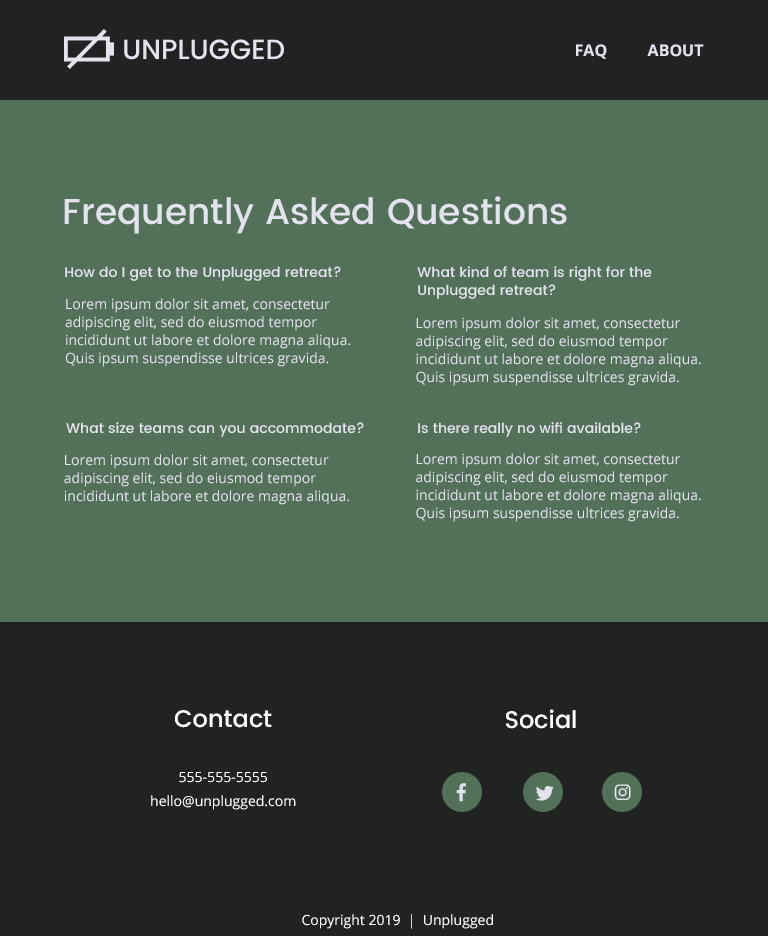
<style>
.page{position:relative;width:768px;height:936px;background:#527158}
.page>*{position:absolute;margin:0}
.t1{font:16px "OpenSans-Bold";color:#e2e3ed}
.t2{font:36px "Poppins-Medium";color:#e2e3ed}
.t3{font:14px "Poppins-Medium";color:#e2e3ed}
.t4{font:14px/18px "Poppins-Medium";color:#e2e3ed}
.t5{font:14px/18px "OpenSans";color:#e2e3ed}
.t6{font:24px "Poppins-Medium";color:#ffffff}
.t7{font:14px/24px "OpenSans";color:#ffffff}
.t8{font:14px "OpenSans";color:#ffffff}
</style>
<div class="page">
<p class="t1" style="left:576px;top:44px;width:31px;height:15px">FAQ</p>
<p class="t1" style="left:647px;top:44px;width:57px;height:13px">ABOUT</p>
<p class="t2" style="left:64px;top:196px;width:503px;height:38px">Frequently Asked Questions</p>
<p class="t3" style="left:65px;top:266px;width:276px;height:15px">How do I get to the Unplugged retreat?</p>
<p class="t4" style="left:417px;top:266px;width:235px;height:33px">What kind of team is right for the Unplugged retreat?</p>
<p class="t5" style="left:65px;top:298px;width:286px;height:69px">Lorem ipsum dolor sit amet, consectetur adipiscing elit, sed do eiusmod tempor incididunt ut labore et dolore magna aliqua. Quis ipsum suspendisse ultrices gravida.</p>
<p class="t5" style="left:416px;top:317px;width:285px;height:69px">Lorem ipsum dolor sit amet, consectetur adipiscing elit, sed do eiusmod tempor incididunt ut labore et dolore magna aliqua. Quis ipsum suspendisse ultrices gravida.</p>
<p class="t3" style="left:66px;top:422px;width:298px;height:15px">What size teams can you accommodate?</p>
<p class="t3" style="left:418px;top:422px;width:223px;height:15px">Is there really no wifi available?</p>
<p class="t5" style="left:64px;top:454px;width:285px;height:51px">Lorem ipsum dolor sit amet, consectetur adipiscing elit, sed do eiusmod tempor incididunt ut labore et dolore magna aliqua.</p>
<p class="t5" style="left:416px;top:453px;width:285px;height:69px">Lorem ipsum dolor sit amet, consectetur adipiscing elit, sed do eiusmod tempor incididunt ut labore et dolore magna aliqua. Quis ipsum suspendisse ultrices gravida.</p>
<p class="t6" style="left:175px;top:710px;width:97px;height:18px">Contact</p>
<p class="t6" style="left:506px;top:709px;width:70px;height:20px">Social</p>
<p class="t7" style="left:151px;top:772px;width:145px;height:38px;text-align:center">555-555-5555<br>hello@unplugged.com</p>
<p class="t8" style="left:302px;top:914px;width:191px;height:15px">Copyright 2019  |  Unplugged</p>
</div>
